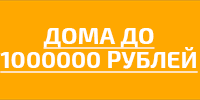
<style>
.page{position:relative;width:200px;height:100px;background:#ffa800}
.page>*{position:absolute;margin:0}
.t1{font:24px/24px "Exo2-Bold";color:#ffffff;text-decoration:underline}
</style>
<div class="page">
<p class="t1" style="left:0px;top:28px;width:198px;height:45px;text-align:center">ДОМА ДО<br>1000000 РУБЛЕЙ</p>
</div>
